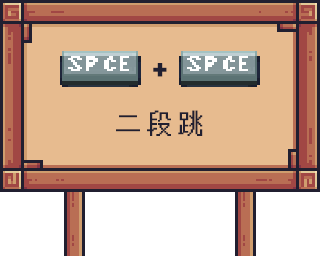
<style>
.page{position:relative;width:320px;height:256px;background:#e7bb8f}
.page>*{position:absolute;margin:0}
.t1{font:25px "STHupo";letter-spacing:0.22em;color:#211f30;font-weight:bold}
.t2{font:25px "FZXS16--GB1-0";letter-spacing:0.22em;color:#211f30;font-weight:bold}
</style>
<div class="page">
<p class="t1" style="left:153px;top:63px;width:14px;height:14px">+</p>
<p class="t2" style="left:116px;top:110px;width:87px;height:26px">二段跳</p>
</div>
